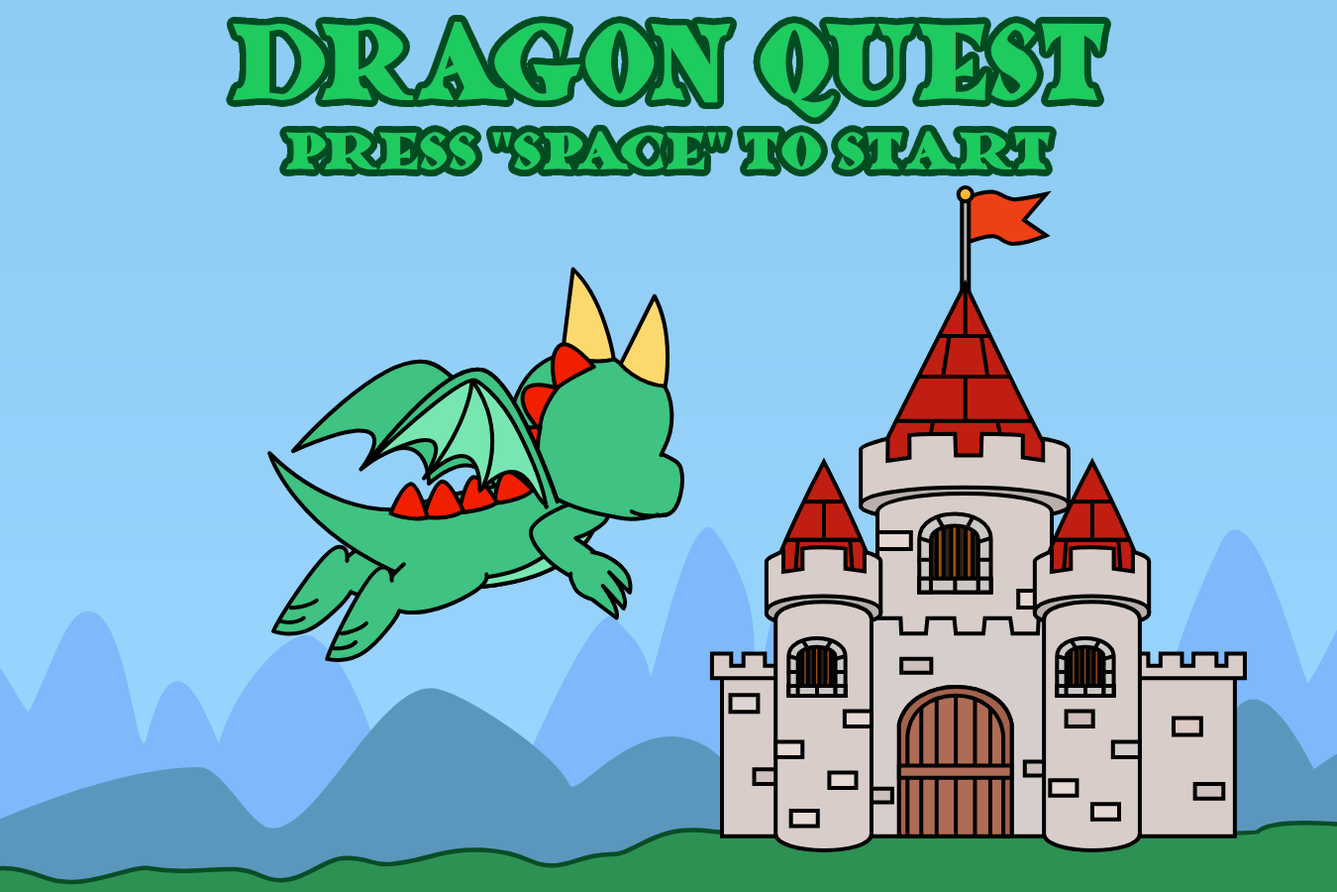
<style>
.page{position:relative;width:1337px;height:892px}
.page>*{position:absolute;margin:0}
.t1{font:118.7px "Dragonlands";color:#1ecb5f;scale:0.85 1}
.t2{font:57.7px "Dragonlands";color:#1ecb5f}
</style>
<div class="page">
<p class="t1" style="left:233px;top:22px;width:873px;height:96px">Dragon Quest</p>
<p class="t2" style="left:285px;top:131px;width:766px;height:39px">Press "SPACE" To Start</p>
</div>
